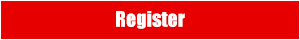
<style>
.page{position:relative;width:300px;height:40px;background:#e70000}
.page>*{position:absolute;margin:0}
.t1{font:20px "Impact";color:#fefffe}
</style>
<div class="page">
<p class="t1" style="left:116px;top:11px;width:69px;height:18px">Register</p>
</div>
